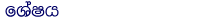
<style>
.page{position:relative;width:200px;height:20px;background:#ffffff}
.page>*{position:absolute;margin:0}
.t1{font:20.8px "FMMalithix";color:#000066}
</style>
<div class="page">
<p class="t1" style="left:5px;top:1px;width:54px;height:16px">fYaIh</p>
</div>
